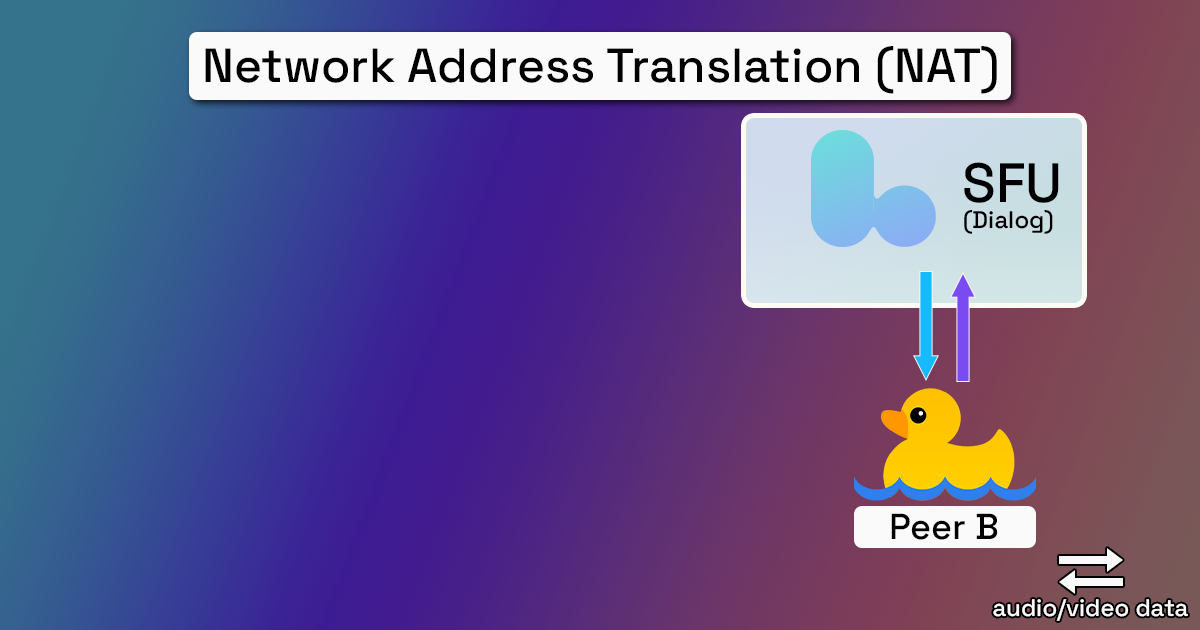
<style>
.page{position:relative;width:1200px;height:630px}
.page>*{position:absolute;margin:0}
.t1{font:48px "SpaceGrotesk-Medium";color:#000000}
.t2{font:55.2px "SpaceGrotesk-Medium";color:#000000}
.t3{font:24px "SpaceGrotesk-Medium";color:#000000}
.t4{font:36px "SpaceGrotesk-Medium";color:#000000}
.t5{font:24px "SpaceGrotesk-Medium";color:#fafafa}
</style>
<div class="page">
<p class="t1" style="left:205px;top:46px;width:792px;height:48px">Network Address Translation (NAT)</p>
<p class="t2" style="left:964px;top:162px;width:95px;height:41px">SFU</p>
<p class="t3" style="left:964px;top:209px;width:89px;height:25px">(Dialog)</p>
<p class="t4" style="left:891px;top:513px;width:107px;height:27px">Peer B</p>
<p class="t5" style="left:993px;top:599px;width:195px;height:22px">audio/video data</p>
</div>
